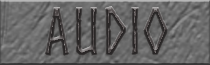
<style>
.page{position:relative;width:210px;height:65px}
.page>*{position:absolute;margin:0}
.t1{font:65px "Norse-Bold";color:#3c3a3a}
</style>
<div class="page">
<p class="t1" style="left:44px;top:6px;width:124px;height:50px">Audio</p>
</div>
